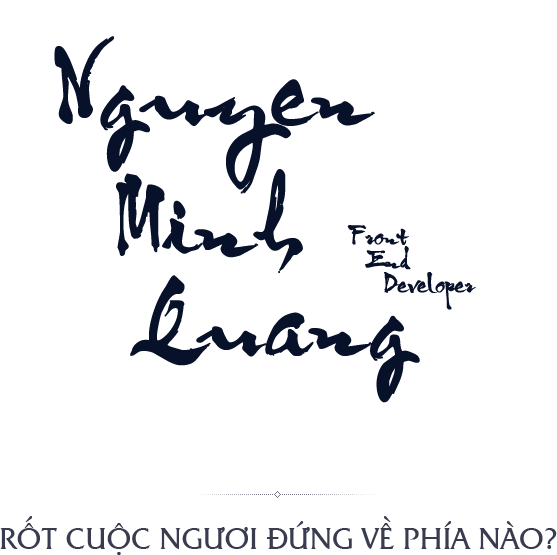
<style>
.page{position:relative;width:557px;height:555px;background:#ffffff}
.page>*{position:absolute;margin:0}
.t1{font:98.8px/98.8px "VNI-OngDoHL";color:#08112a;font-weight:bold;scale:0.97 1}
.t2{font:98.8px/131.7px "VNI-OngDoHL";color:#08112a;font-weight:bold;scale:0.97 1}
.t3{font:24px/24px "VNI-OngDoHL";color:#08112a;font-weight:bold;scale:0.97 1}
</style>
<div class="page">
<p class="t1" style="left:54px;top:36px;width:366px;height:367px"><span class="t2">Nguyen<br>  </span>Minh<br>   Quang</p>
<p class="t3" style="left:347px;top:225px;width:129px;height:85px">Front<br>  End<br> Developer</p>
</div>
